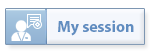
<style>
.page{position:relative;width:153px;height:53px;background:#ffffff}
.page>*{position:absolute;margin:0}
.t1{font:16px "MyriadPro-Bold";color:#608dc0}
</style>
<div class="page">
<p class="t1" style="left:58px;top:20px;width:76px;height:16px">My session</p>
</div>
